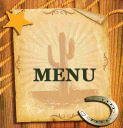
<style>
.page{position:relative;width:123px;height:128px}
.page>*{position:absolute;margin:0}
.t1{font:17.9px "Georgia-Bold";color:#2f3723;font-weight:bold}
</style>
<div class="page">
<p class="t1" style="left:33px;top:68px;width:64px;height:14px">MENU</p>
</div>
